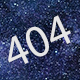
<style>
.page{position:relative;width:80px;height:80px}
.page>*{position:absolute;margin:0}
.t1{font:34.2px "MyriadPro-Regular";color:#e5e5e5}
</style>
<div class="page">
<p class="t1" style="left:8px;top:15px;width:63px;height:49px;rotate:-25deg">404</p>
</div>
